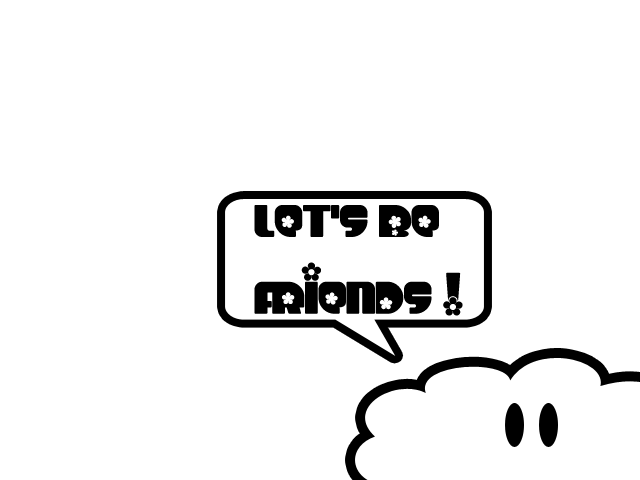
<style>
.page{position:relative;width:640px;height:480px;background:#ffffff}
.page>*{position:absolute;margin:0}
.t1{font:64px "Chick";color:#000000}
</style>
<div class="page">
<p class="t1" style="left:254px;top:205px;width:209px;height:111px">LET’S BE <br>FRIENDS !</p>
<p class="t1" style="left:301px;top:262px;width:20px;height:19px">-</p>
</div>
